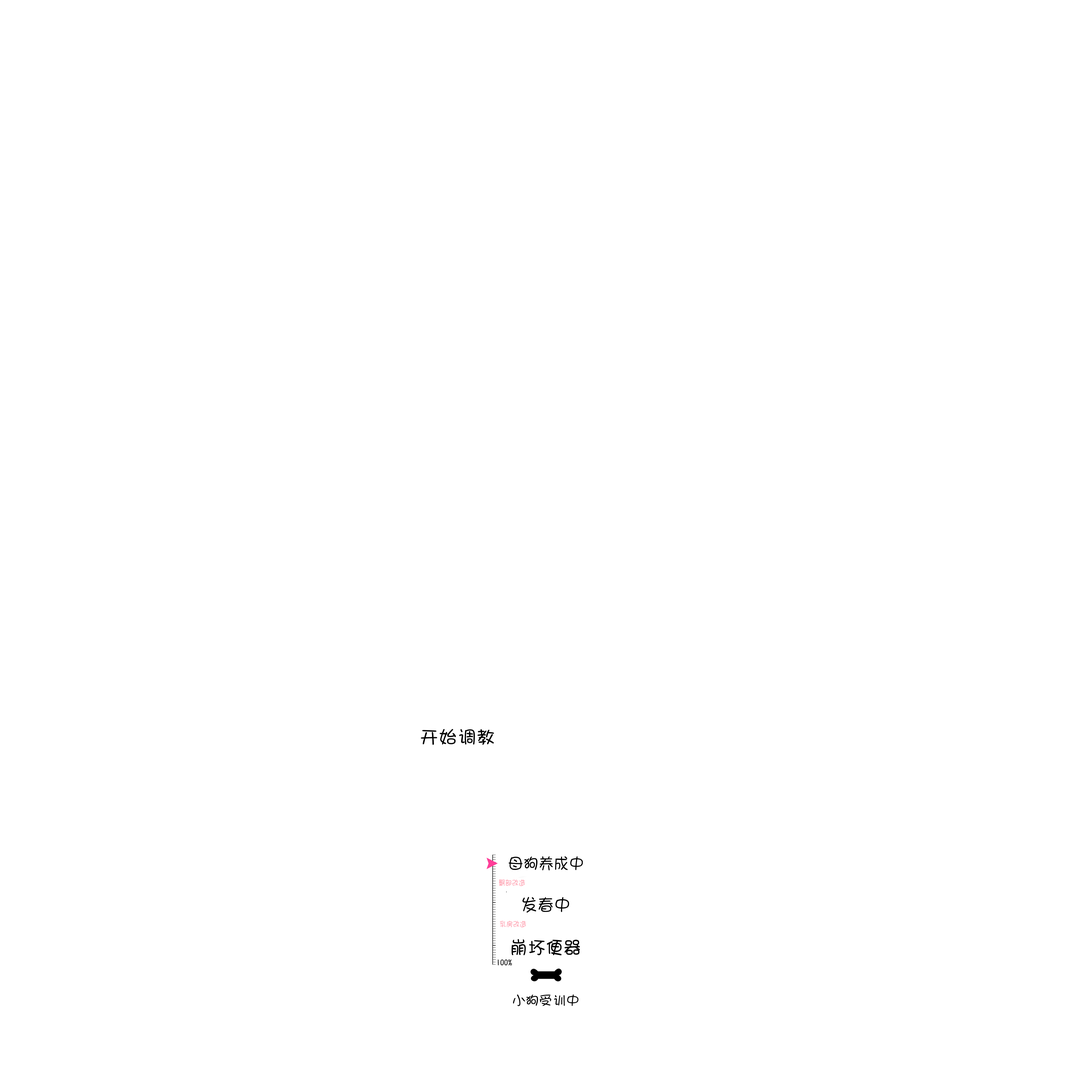
<style>
.page{position:relative;width:1092px;height:1092px;background:#ffffff}
.page>*{position:absolute;margin:0}
.t1{font:18px "»ª¿µÉÙÅ®";color:#000000;scale:1.05 1}
.t2{font:16px "»ª¿µÉÙÅ®";color:#000000;scale:0.95 1}
.t3{font:7.5px "»ª¿µÉÙÅ®";color:#ff9faf;scale:0.9 1}
.t4{font:17.3px "»ª¿µÉÙÅ®";color:#000000;scale:0.95 1}
.t5{font:18.7px "»ª¿µÉÙÅ®";color:#000000;scale:0.95 1}
.t6{font:8px "»ª¿µÉÙÅ®";color:#000000}
.t7{font:13.3px "»ª¿µÉÙÅ®";color:#000000}
</style>
<div class="page">
<p class="t1" style="left:421px;top:729px;width:73px;height:16px">开始调教</p>
<p class="t2" style="left:509px;top:856px;width:74px;height:14px">母狗养成中</p>
<p class="t3" style="left:499px;top:879px;width:26px;height:7px">臀部改造</p>
<p class="t4" style="left:522px;top:897px;width:47px;height:16px">发春中</p>
<p class="t3" style="left:500px;top:921px;width:26px;height:6px">乳房改造</p>
<p class="t5" style="left:512px;top:939px;width:68px;height:16px">崩坏便器</p>
<p class="t6" style="left:498px;top:959px;width:14px;height:6px">100%</p>
<p class="t7" style="left:513px;top:994px;width:66px;height:12px">小狗受训中</p>
</div>
